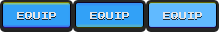
<style>
.page{position:relative;width:219px;height:32px;background:#32a1f7}
.page>*{position:absolute;margin:0}
.t1{font:8px "PressStart2P";color:#e5e5e5}
</style>
<div class="page">
<p class="t1" style="left:17px;top:12px;width:39px;height:7px">EQUIP</p>
<p class="t1" style="left:90px;top:12px;width:39px;height:7px">EQUIP</p>
<p class="t1" style="left:163px;top:12px;width:39px;height:7px">EQUIP</p>
</div>
